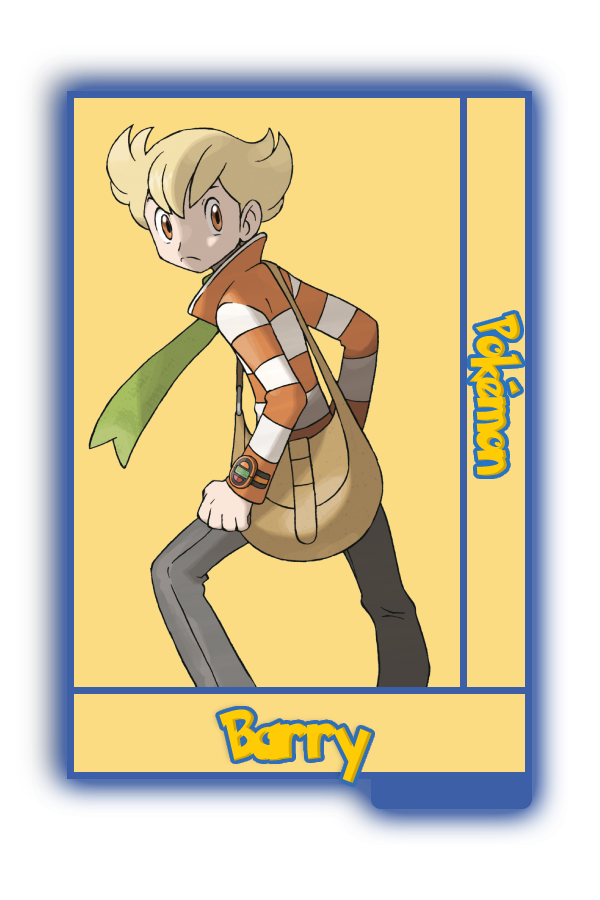
<style>
.page{position:relative;width:600px;height:900px;background:#fbdc83}
.page>*{position:absolute;margin:0}
.t1{font:48.8px "PokemonSolidNormal";color:#ffcb05;scale:0.8 1}
.t2{font:56.6px "PokemonSolidNormal";color:#ffcb05;scale:0.92 1}
</style>
<div class="page">
<p class="t1" style="left:469px;top:313px;width:54px;height:163px;rotate:90deg">Pokémon</p>
<p class="t2" style="left:219px;top:709px;width:153px;height:74px">Barry</p>
</div>
